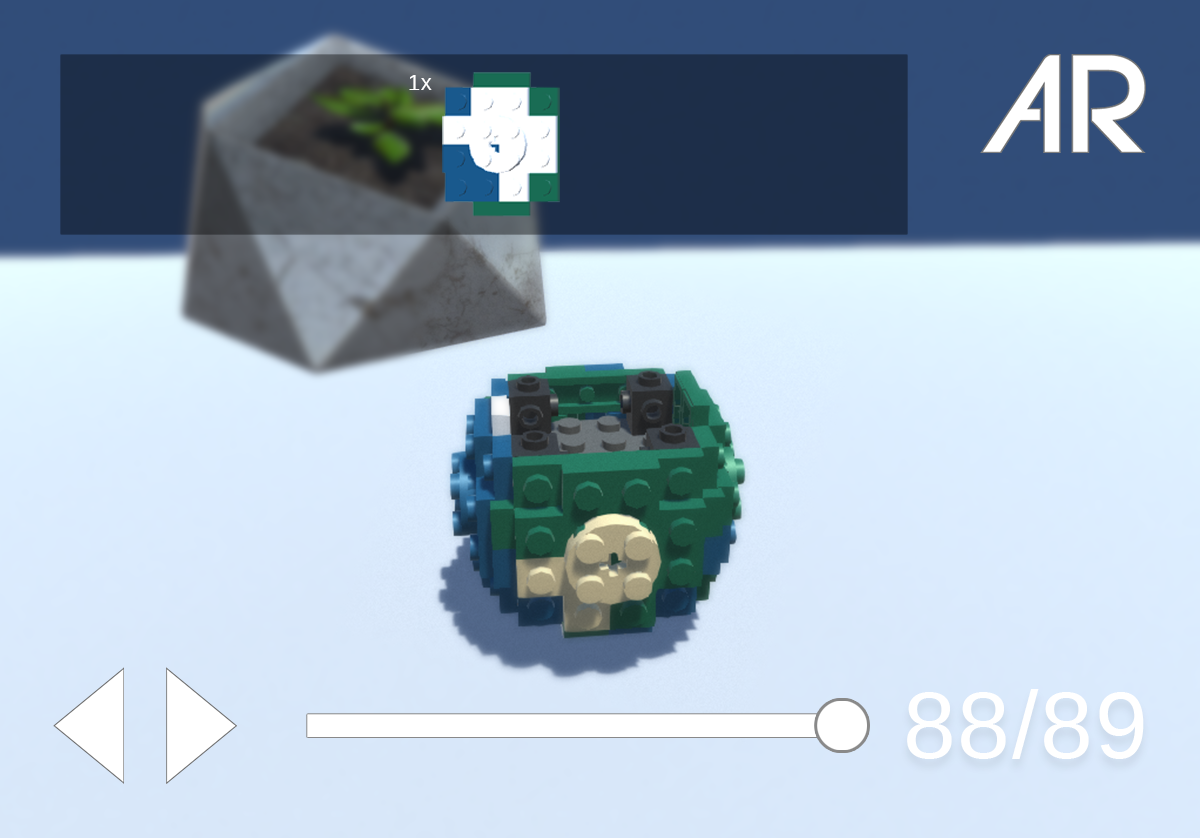
<style>
.page{position:relative;width:1200px;height:838px}
.page>*{position:absolute;margin:0}
.t1{font:22.1px "LiberationSans";letter-spacing:0.02em;color:#ffffff}
.t2{font:94.6px "LiberationSans";letter-spacing:0.02em;color:#ffffff}
</style>
<div class="page">
<p class="t1" style="left:409px;top:75px;width:23px;height:15px">1x</p>
<p class="t2" style="left:907px;top:689px;width:237px;height:70px">88/89</p>
</div>
